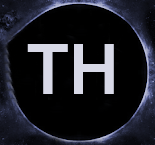
<style>
.page{position:relative;width:155px;height:145px;background:#000000}
.page>*{position:absolute;margin:0}
.t1{font:72px "Ubuntu-Medium";color:#d8d9e7}
</style>
<div class="page">
<p class="t1" style="left:27px;top:44px;width:87px;height:50px">TH</p>
</div>
